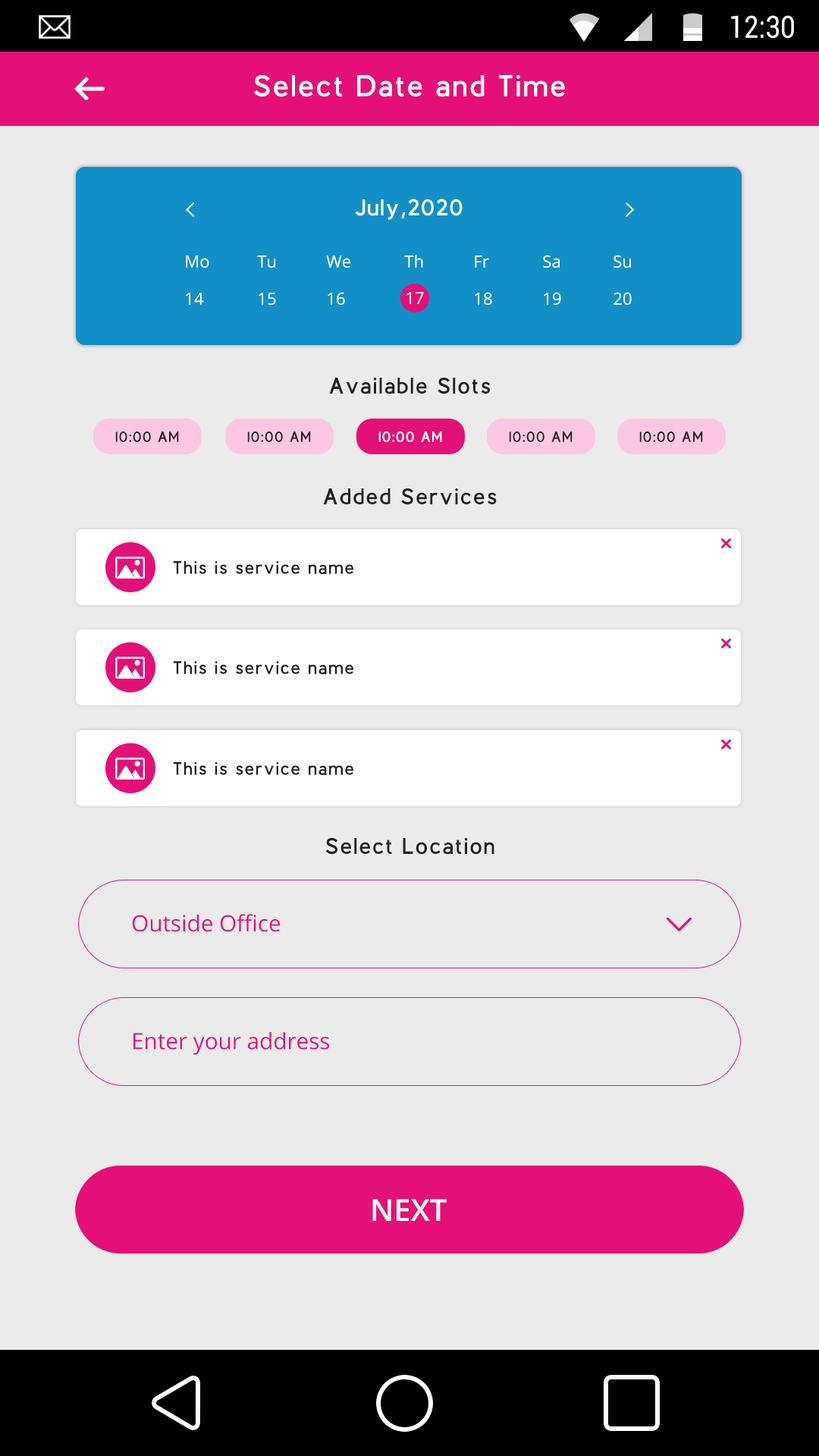
<style>
.page{position:relative;width:819px;height:1456px;background:#ebebeb}
.page>*{position:absolute;margin:0}
.t1{font:30.5px "Roboto-Regular";color:#ffffff;scale:0.87 1}
.t2{font:30.3px "BerlinBold";letter-spacing:0.1em;color:#ffffff}
.t3{font:22.7px "BerlinBold";letter-spacing:0.1em;color:#ffffff}
.t4{font:16.7px "OpenSans";color:#ffffff}
.t5{font:22.7px "BerlinBold";letter-spacing:0.1em;color:#222222}
.t6{font:14.9px "BerlinBold";letter-spacing:0.1em;color:#222222}
.t7{font:14.9px "BerlinBold";letter-spacing:0.1em;color:#ffffff}
.t8{font:18.2px "BerlinBold";letter-spacing:0.1em;color:#222222}
.t9{font:22.5px "OpenSans";color:#e41077}
.t10{font:22.6px "OpenSans";color:#e41077}
.t11{font:30.3px "OpenSans-Semibold";color:#ffffff}
</style>
<div class="page">
<p class="t1" style="left:731px;top:15px;width:63px;height:24px">12:30</p>
<p class="t2" style="left:254px;top:75px;width:311px;height:22px">Select Date and Time</p>
<p class="t3" style="left:355px;top:199px;width:108px;height:21px">July,2020</p>
<p class="t4" style="left:186px;top:256px;width:23px;height:12px">Mo</p>
<p class="t4" style="left:257px;top:256px;width:18px;height:12px">Tu</p>
<p class="t4" style="left:326px;top:256px;width:24px;height:12px">We</p>
<p class="t4" style="left:404px;top:255px;width:19px;height:13px">Th</p>
<p class="t4" style="left:475px;top:256px;width:14px;height:12px">Fr</p>
<p class="t4" style="left:543px;top:255px;width:17px;height:13px">Sa</p>
<p class="t4" style="left:613px;top:255px;width:18px;height:13px">Su</p>
<p class="t4" style="left:186px;top:293px;width:18px;height:12px">14</p>
<p class="t4" style="left:259px;top:293px;width:17px;height:12px">15</p>
<p class="t4" style="left:328px;top:292px;width:17px;height:13px">16</p>
<p class="t4" style="left:406px;top:292px;width:18px;height:12px">17</p>
<p class="t4" style="left:475px;top:292px;width:17px;height:13px">18</p>
<p class="t4" style="left:544px;top:292px;width:17px;height:13px">19</p>
<p class="t4" style="left:613px;top:292px;width:19px;height:13px">20</p>
<p class="t5" style="left:329px;top:378px;width:162px;height:16px">Available Slots</p>
<p class="t6" style="left:115px;top:431px;width:64px;height:11px">10:00 AM</p>
<p class="t6" style="left:247px;top:431px;width:64px;height:11px">10:00 AM</p>
<p class="t7" style="left:378px;top:431px;width:64px;height:11px">10:00 AM</p>
<p class="t6" style="left:509px;top:431px;width:64px;height:11px">10:00 AM</p>
<p class="t6" style="left:639px;top:431px;width:64px;height:11px">10:00 AM</p>
<p class="t5" style="left:323px;top:488px;width:174px;height:17px">Added Services</p>
<p class="t8" style="left:173px;top:561px;width:180px;height:13px">This is service name</p>
<p class="t8" style="left:173px;top:661px;width:180px;height:13px">This is service name</p>
<p class="t8" style="left:173px;top:762px;width:180px;height:13px">This is service name</p>
<p class="t5" style="left:325px;top:838px;width:169px;height:17px">Select Location</p>
<p class="t9" style="left:132px;top:914px;width:149px;height:18px">Outside Office</p>
<p class="t10" style="left:133px;top:1032px;width:196px;height:23px">Enter your address</p>
<p class="t11" style="left:372px;top:1199px;width:75px;height:22px">NEXT</p>
</div>
